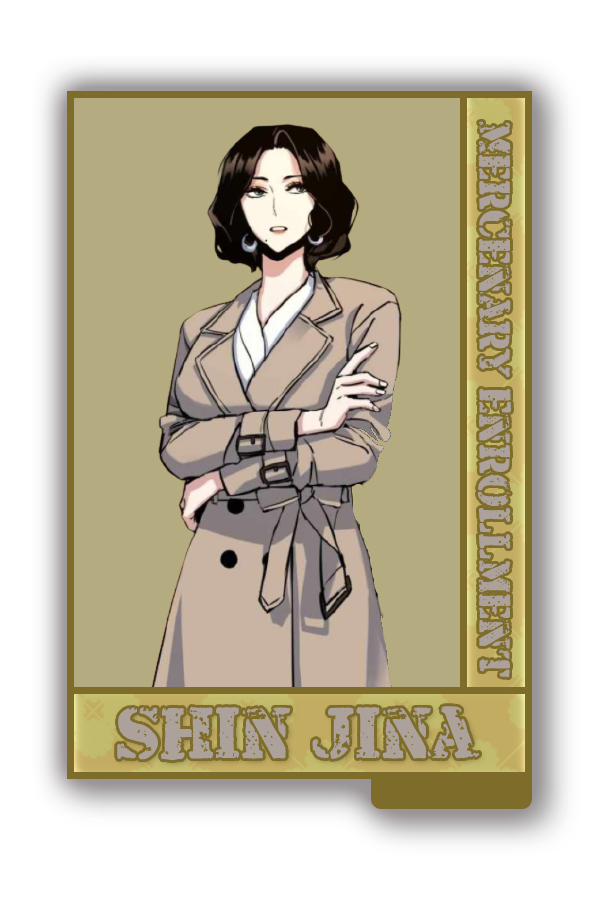
<style>
.page{position:relative;width:600px;height:900px;background:#b5ab81}
.page>*{position:absolute;margin:0}
.t1{font:45px "ArmaliteRifle";color:#aca29b}
.t2{font:75px "ArmaliteRifle";color:#aca29b}
</style>
<div class="page">
<p class="t1" style="left:477px;top:121px;width:34px;height:556px;rotate:90deg">Mercenary Enrollment</p>
<p class="t2" style="left:117px;top:706px;width:363px;height:55px">Shin Jina</p>
</div>
